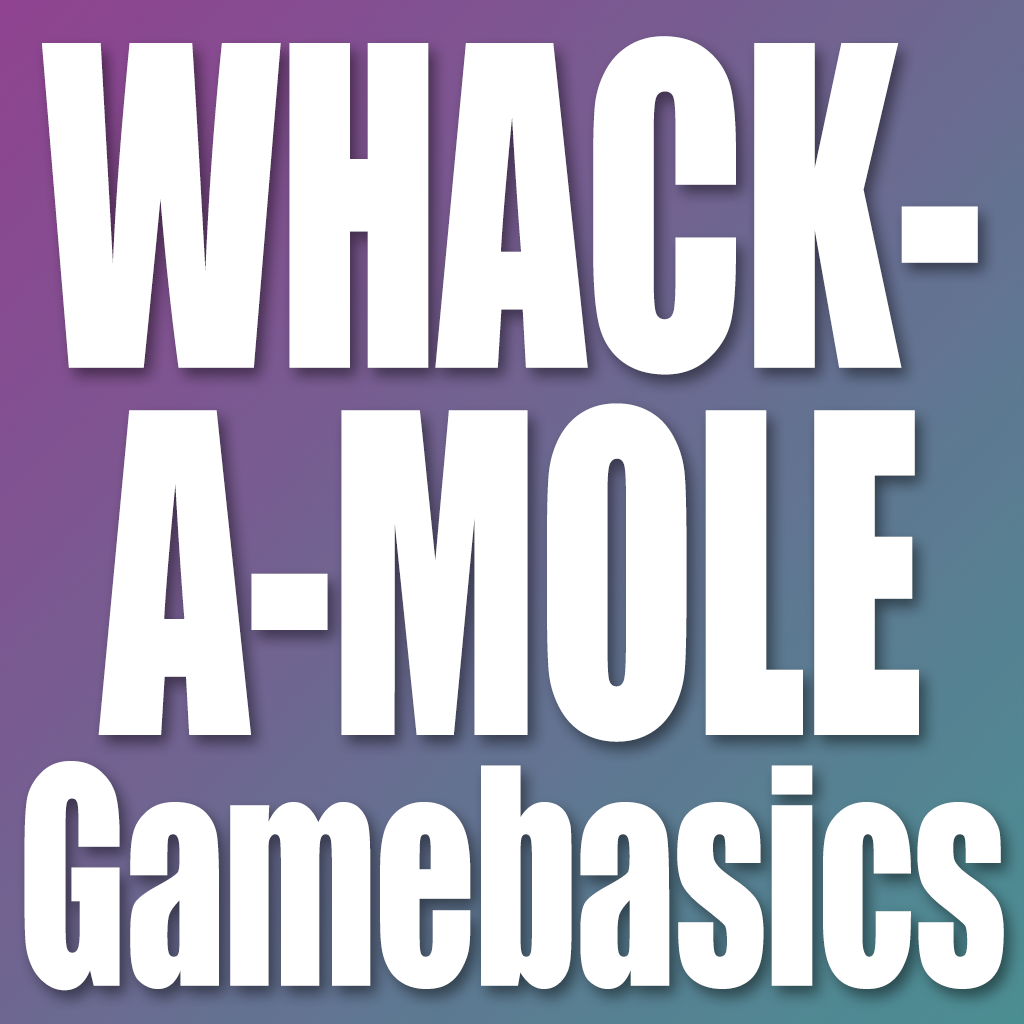
<style>
.page{position:relative;width:1024px;height:1024px;background:#ffffff}
.page>*{position:absolute;margin:0}
.t1{font:410.6px/367.2px "Impact";letter-spacing:-0.01em;color:#ffffff;scale:0.71 1}
.t2{font:278.4px/250.8px "Impact";letter-spacing:-0.01em;color:#ffffff;scale:0.71 1}
</style>
<div class="page">
<p class="t1" style="left:24px;top:36px;width:980px;height:955px;text-align:center">WHACK-<br>A-MOLE<br><span class="t2">Gamebasics</span></p>
</div>
